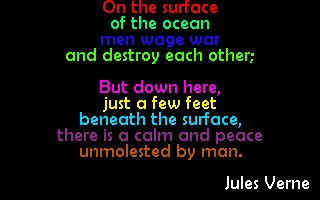
<style>
.page{position:relative;width:320px;height:200px;background:#000000}
.page>*{position:absolute;margin:0}
.t1{font:19px/16px "BerlinSansFB-Reg";color:#8f2c8c}
.t2{font:19px/16px "BerlinSansFB-Reg";color:#ff0000}
.t3{font:19px/16px "BerlinSansFB-Reg";color:#00ff6c}
.t4{font:19px/16px "BerlinSansFB-Reg";color:#2a00ff}
.t5{font:19px/16px "BerlinSansFB-Reg";color:#48ff00}
.t6{font:19px/16px "BerlinSansFB-Reg";color:#ff00ea}
.t7{font:19px/16px "BerlinSansFB-Reg";color:#fff600}
.t8{font:19px/16px "BerlinSansFB-Reg";color:#00d8ff}
.t9{font:19px/16px "BerlinSansFB-Reg";color:#bd5807}
.t10{font:19px/16px "BerlinSansFB-Reg";color:#ffffff}
</style>
<div class="page">
<p class="t1" style="left:57px;top:0px;width:252px;height:190px;text-align:center"><span class="t2">On the surface<br></span><span class="t3">of the ocean<br></span><span class="t4">men wage war<br></span><span class="t5">and destroy each other;<br><br></span><span class="t6">But down here,<br></span><span class="t7">just a few feet<br></span><span class="t8">beneath the surface,<br></span>there is a calm and peace<br><span class="t9">unmolested by man.<br></span><span class="t10"><br>             Jules Verne</span></p>
</div>
